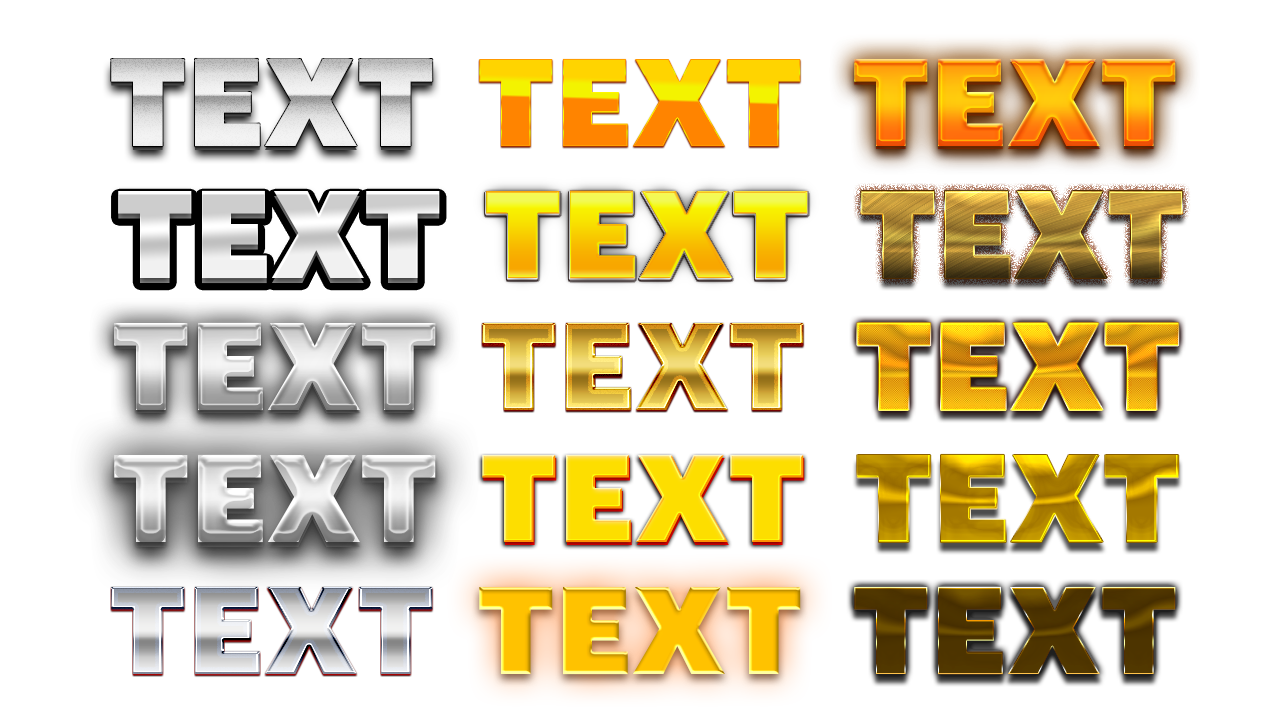
<style>
.page{position:relative;width:1280px;height:720px;background:#ffffff}
.page>*{position:absolute;margin:0}
.t1{font:121.7px "GraphikArabic-Super";text-transform:uppercase}
.t2{font:121.7px "GraphikArabic-Super";color:#fdde00;text-transform:uppercase}
.t3{font:121.7px "GraphikArabic-Super";color:#4f3500;text-transform:uppercase}
</style>
<div class="page">
<p class="t1" style="left:479px;top:58px;width:322px;height:89px">TEXT</p>
<p class="t1" style="left:854px;top:58px;width:322px;height:89px">TEXT</p>
<p class="t1" style="left:118px;top:190px;width:322px;height:89px">TEXT</p>
<p class="t1" style="left:486px;top:190px;width:322px;height:89px">TEXT</p>
<p class="t1" style="left:861px;top:190px;width:322px;height:89px">TEXT</p>
<p class="t1" style="left:114px;top:322px;width:322px;height:89px">TEXT</p>
<p class="t1" style="left:482px;top:322px;width:322px;height:89px">TEXT</p>
<p class="t1" style="left:857px;top:322px;width:322px;height:89px">TEXT</p>
<p class="t1" style="left:114px;top:454px;width:322px;height:89px">TEXT</p>
<p class="t2" style="left:482px;top:454px;width:322px;height:89px">TEXT</p>
<p class="t1" style="left:857px;top:454px;width:322px;height:89px">TEXT</p>
<p class="t1" style="left:111px;top:586px;width:322px;height:89px">TEXT</p>
<p class="t1" style="left:479px;top:586px;width:322px;height:89px">TEXT</p>
<p class="t3" style="left:854px;top:586px;width:322px;height:89px">TEXT</p>
</div>
